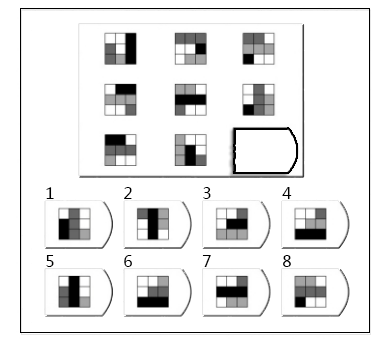
<style>
.page{position:relative;width:385px;height:348px;background:#ffffff}
.page>*{position:absolute;margin:0}
.t1{font:16px "MicrosoftYaHei";color:#000000}
</style>
<div class="page">
<p class="t1" style="left:46px;top:187px;width:8px;height:12px">1</p>
<p class="t1" style="left:124px;top:187px;width:8px;height:12px">2</p>
<p class="t1" style="left:203px;top:187px;width:8px;height:12px">3</p>
<p class="t1" style="left:282px;top:187px;width:10px;height:12px">4</p>
<p class="t1" style="left:46px;top:255px;width:8px;height:12px">5</p>
<p class="t1" style="left:124px;top:255px;width:8px;height:12px">6</p>
<p class="t1" style="left:202px;top:255px;width:9px;height:12px">7</p>
<p class="t1" style="left:283px;top:255px;width:8px;height:12px">8</p>
</div>
